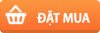
<style>
.page{position:relative;width:100px;height:33px}
.page>*{position:absolute;margin:0}
.t1{font:14px "MyriadPro-SemiboldSemiCn";letter-spacing:0.005em;color:#ffffff;text-transform:uppercase}
</style>
<div class="page">
<p class="t1" style="left:37px;top:10px;width:53px;height:16px">đặt mua</p>
</div>
